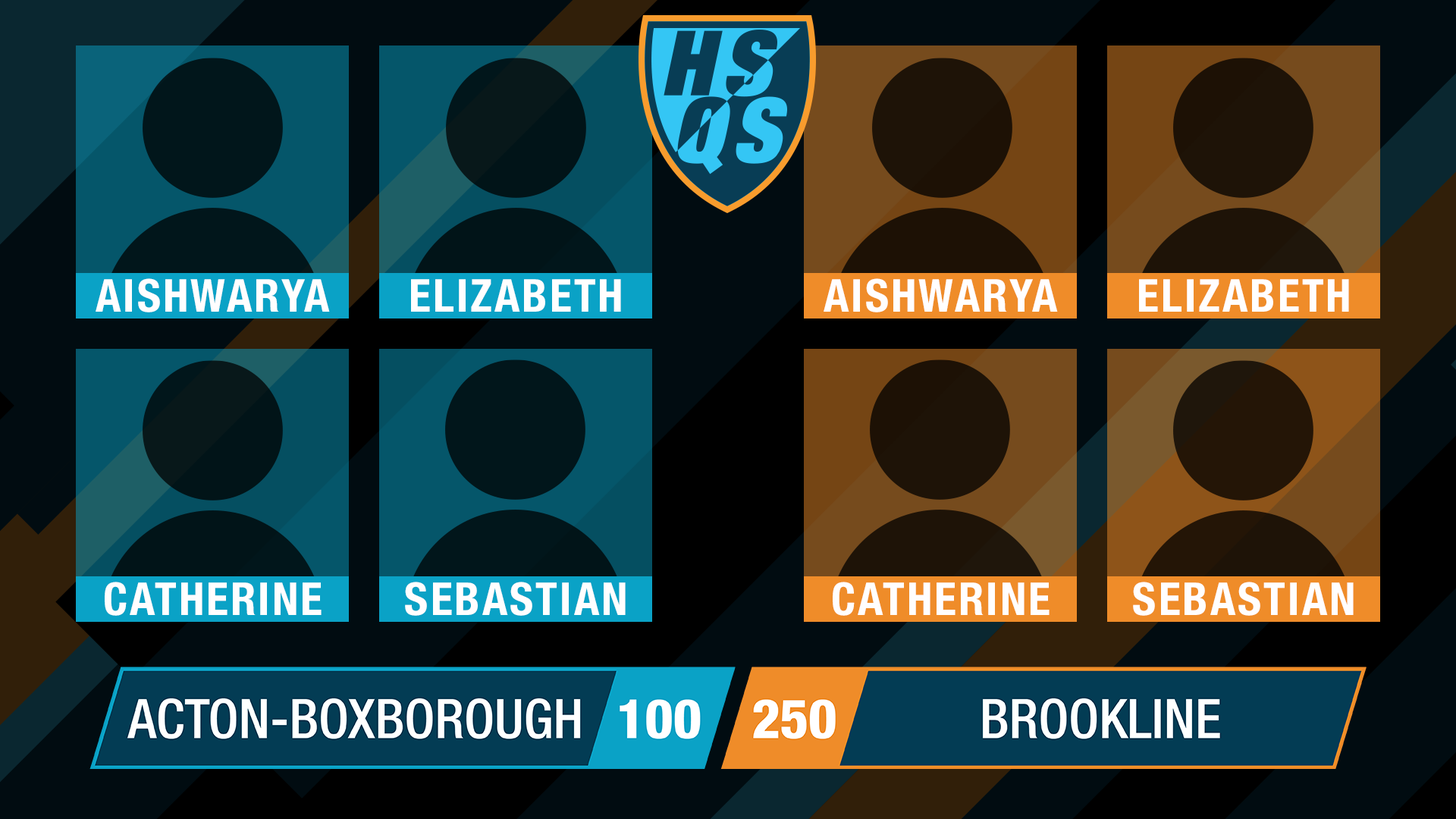
<style>
.page{position:relative;width:1456px;height:819px}
.page>*{position:absolute;margin:0}
.t1{font:45.5px "HelveticaNeue-BoldCond";letter-spacing:0.05em;color:#fffefe}
</style>
<div class="page">
<p class="t1" style="left:96px;top:278px;width:234px;height:34px">AISHWARYA</p>
<p class="t1" style="left:411px;top:279px;width:210px;height:33px">ELIZABETH</p>
<p class="t1" style="left:824px;top:278px;width:234px;height:34px">AISHWARYA</p>
<p class="t1" style="left:1139px;top:279px;width:210px;height:33px">ELIZABETH</p>
<p class="t1" style="left:105px;top:582px;width:217px;height:34px">CATHERINE</p>
<p class="t1" style="left:405px;top:582px;width:221px;height:34px">SEBASTIAN</p>
<p class="t1" style="left:833px;top:582px;width:217px;height:34px">CATHERINE</p>
<p class="t1" style="left:1133px;top:582px;width:221px;height:34px">SEBASTIAN</p>
</div>
